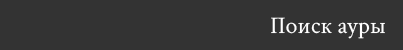
<style>
.page{position:relative;width:403px;height:50px;background:#333333}
.page>*{position:absolute;margin:0}
.t1{font:24px "CrimsonText-Regular";color:#ffffff}
</style>
<div class="page">
<p class="t1" style="left:271px;top:17px;width:114px;height:22px">Поиск ауры</p>
</div>
